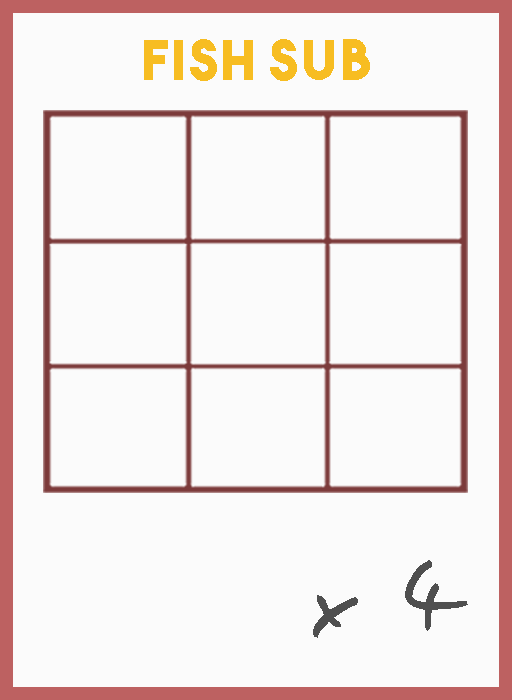
<style>
.page{position:relative;width:512px;height:700px;background:#fbfbfb}
.page>*{position:absolute;margin:0}
.t1{font:54.5px "TheBoldFont";letter-spacing:0.05em;color:#f7bd22}
.t2{font:106.1px "EasySpeech";letter-spacing:0.05em;color:#4f4f4f}
</style>
<div class="page">
<p class="t1" style="left:144px;top:39px;width:226px;height:42px">fish sub</p>
<p class="t2" style="left:313px;top:560px;width:155px;height:78px">x 4</p>
</div>
